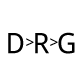
<style>
.page{position:relative;width:80px;height:80px;background:#ffffff}
.page>*{position:absolute;margin:0}
.t1{font:28.6px "DroidSans";color:#000000}
.t2{font:15.9px "DroidSans";color:#000000}
</style>
<div class="page">
<p class="t1" style="left:8px;top:32px;width:67px;height:22px">D R G</p>
<p class="t2" style="left:26px;top:38px;width:8px;height:8px">&gt;</p>
<p class="t2" style="left:50px;top:38px;width:8px;height:8px">&gt;</p>
</div>
